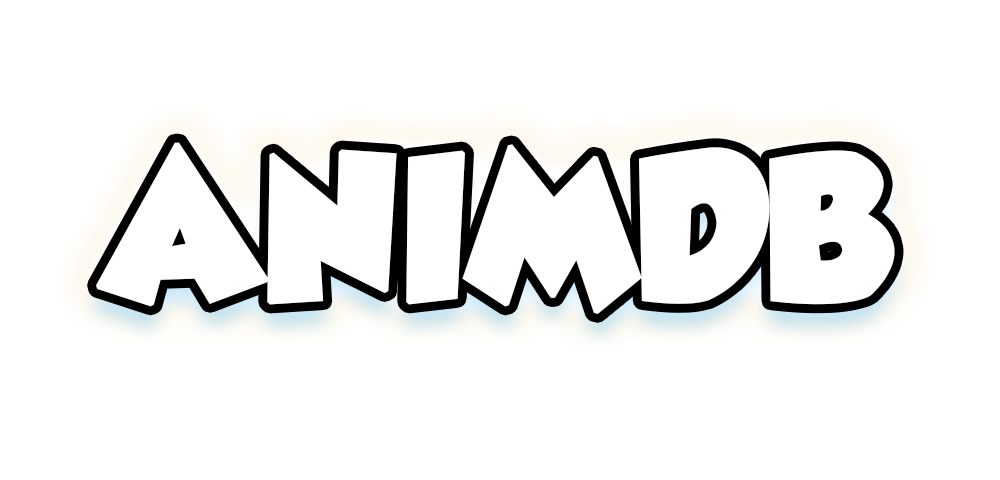
<style>
.page{position:relative;width:1000px;height:480px;background:#ffffff}
.page>*{position:absolute;margin:0}
.t1{font:177px "GROBOLD";color:#ffffff;font-weight:bold}
</style>
<div class="page">
<p class="t1" style="left:96px;top:142px;width:799px;height:172px">ANIMDB</p>
</div>
